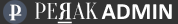
<style>
.page{position:relative;width:178px;height:24px;background:#333333}
.page>*{position:absolute;margin:0}
.t1{font:22.4px "Oranienbaum";color:#ffffff;font-weight:bold}
.t2{font:23.3px "Oranienbaum";color:#ffffff}
.t3{font:23.3px "Oranienbaum";color:#ffffff;font-weight:bold;text-decoration:underline}
.t4{font:23.3px "Calibri-Bold";color:#ffffff}
</style>
<div class="page">
<p class="t1" style="left:9px;top:4px;width:13px;height:17px">P</p>
<p class="t2" style="left:35px;top:2px;width:22px;height:17px">PE</p>
<p class="t3" style="left:57px;top:2px;width:15px;height:22px;rotate:180deg">R</p>
<p class="t2" style="left:72px;top:2px;width:26px;height:17px">AK</p>
<p class="t4" style="left:101px;top:4px;width:71px;height:15px">ADMIN</p>
</div>
